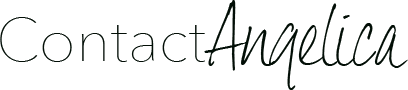
<style>
.page{position:relative;width:408px;height:90px;background:#ffffff}
.page>*{position:absolute;margin:0}
.t1{font:72.1px "DexteraTrial";color:#020e06}
.t2{font:60px "AvenirNext-UltraLight";color:#020e06}
</style>
<div class="page">
<p class="t1" style="left:204px;top:0px;width:204px;height:90px">Angelica</p>
<p class="t2" style="left:0px;top:17px;width:205px;height:45px">Contact</p>
</div>
